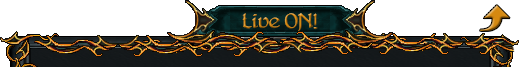
<style>
.page{position:relative;width:519px;height:67px;background:#ffffff}
.page>*{position:absolute;margin:0}
.t1{font:18px "DelitschAntiqua"}
</style>
<div class="page">
<p class="t1" style="left:242px;top:13px;width:76px;height:18px">Live ON!</p>
</div>
